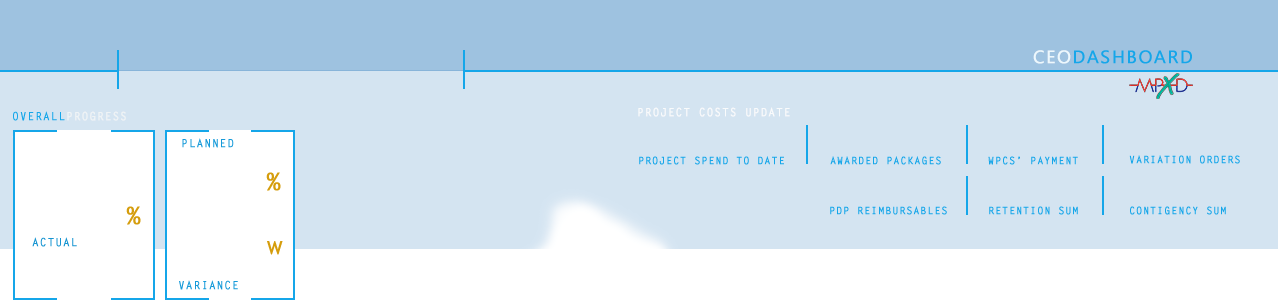
<style>
.page{position:relative;width:1278px;height:300px;background:#d4e4f1}
.page>*{position:absolute;margin:0}
.t1{font:18px "Ebrima";letter-spacing:0.075em;color:#15a6e9;font-weight:bold}
.t2{font:18px "Ebrima";letter-spacing:0.075em;color:#edf8fd;font-weight:bold}
.t3{font:11px "LetterGothicStd-Bold";letter-spacing:0.075em;color:#eff4f6;font-weight:bold}
.t4{font:11px "LetterGothicStd-Bold";letter-spacing:0.075em;color:#15a6e9;font-weight:bold}
.t5{font:11px "LetterGothicStd-Bold";letter-spacing:0.075em;color:#f9fbfc;font-weight:bold}
.t6{font:11px "LetterGothicStd-Bold";letter-spacing:0.075em;color:#169ad9;font-weight:bold}
.t7{font:10px "LetterGothicStd-Bold";letter-spacing:0.075em;color:#15a6e9;font-weight:bold}
.t8{font:24px "TrebuchetMS";letter-spacing:0.01em;color:#d59d0d;font-weight:bold}
.t9{font:11px "LetterGothicStd-Bold";letter-spacing:0.075em;color:#1694d1;font-weight:bold}
.t10{font:18px "TrebuchetMS";letter-spacing:0.01em;color:#d59d0d;font-weight:bold}
</style>
<div class="page">
<p class="t1" style="left:1033px;top:50px;width:159px;height:14px"><span class="t2">CEO</span>DASHBOARD</p>
<p class="t3" style="left:13px;top:111px;width:113px;height:10px"><span class="t4">OVERALL</span>PROGRESS</p>
<p class="t5" style="left:638px;top:107px;width:152px;height:10px">PROJECT COSTS UPDATE</p>
<p class="t6" style="left:182px;top:138px;width:52px;height:10px">PLANNED</p>
<p class="t7" style="left:639px;top:156px;width:145px;height:9px">PROJECT SPEND TO DATE</p>
<p class="t7" style="left:830px;top:156px;width:111px;height:9px">AWARDED PACKAGES</p>
<p class="t7" style="left:988px;top:156px;width:90px;height:9px">WPCS’ PAYMENT</p>
<p class="t7" style="left:1129px;top:155px;width:111px;height:9px">VARIATION ORDERS</p>
<p class="t8" style="left:266px;top:172px;width:15px;height:19px">%</p>
<p class="t8" style="left:126px;top:206px;width:15px;height:19px">%</p>
<p class="t7" style="left:830px;top:206px;width:117px;height:9px">PDP REIMBURSABLES</p>
<p class="t7" style="left:989px;top:206px;width:89px;height:9px">RETENTION SUM</p>
<p class="t7" style="left:1130px;top:206px;width:96px;height:9px">CONTIGENCY SUM</p>
<p class="t9" style="left:32px;top:237px;width:45px;height:10px">ACTUAL</p>
<p class="t10" style="left:267px;top:241px;width:16px;height:14px">W</p>
<p class="t6" style="left:179px;top:280px;width:59px;height:10px">VARIANCE</p>
</div>
